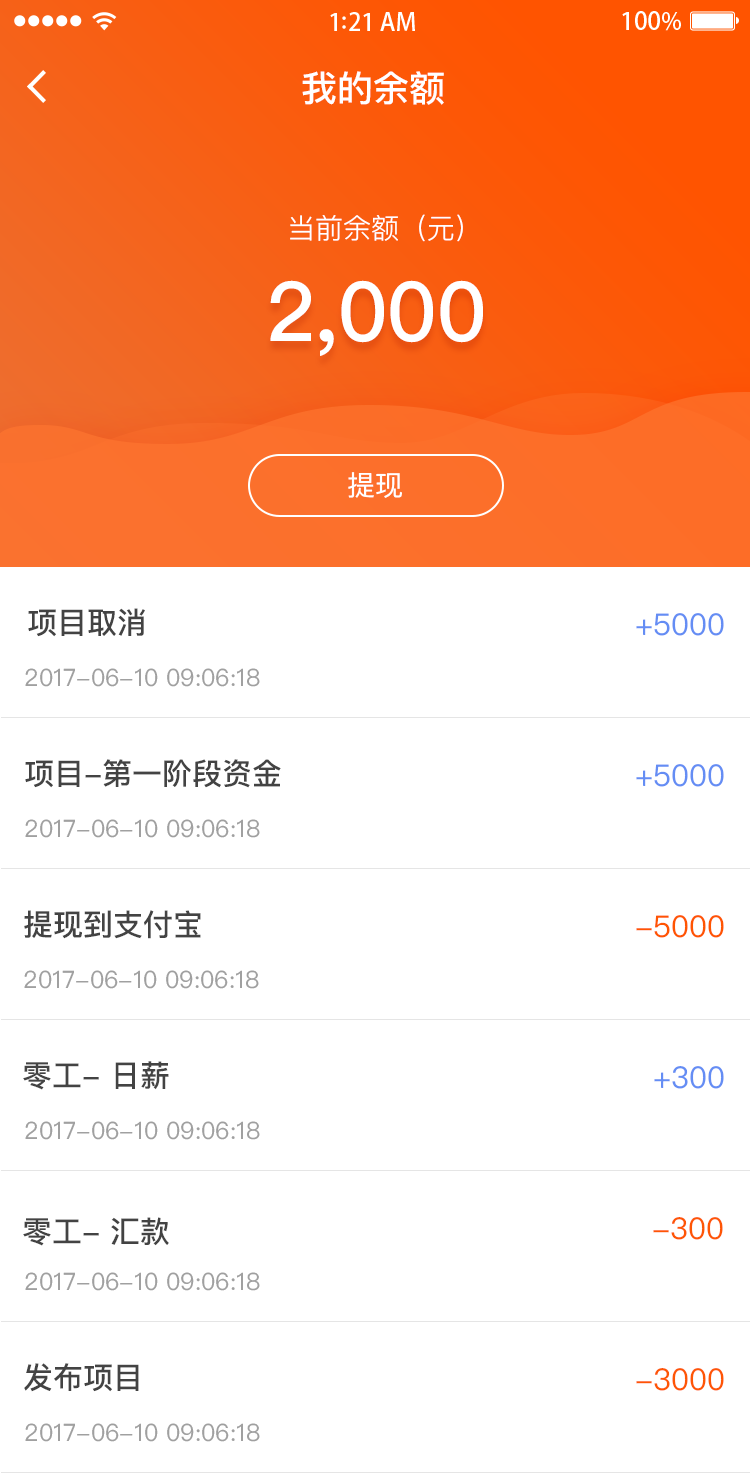
<style>
.page{position:relative;width:750px;height:1473px;background:#ffffff}
.page>*{position:absolute;margin:0}
.t1{font:36px "PingFangSC-Medium";color:#ffffff}
.t2{font:28px "PingFangSC-Light";color:#ffffff}
.t3{font:82.6px "PingFangSC-Medium";color:#ffffff}
.t4{font:28px "PingFangSC-Regular";color:#ffffff}
.t5{font:30px "PingFangSC-Medium";color:#434343}
.t6{font:30px "PingFangSC-Regular";color:#648df4}
.t7{font:24px "PingFangSC-Regular";color:#a0a0a0}
.t8{font:30px "PingFangSC-Regular";color:#ff5501}
.t9{font:30px "PingFangSC-Regular";color:#fe5604}
</style>
<div class="page">
<p class="t1" style="left:302px;top:71px;width:142px;height:34px">我的余额</p>
<p class="t2" style="left:290px;top:214px;width:173px;height:28px">当前余额（元）</p>
<p class="t3" style="left:270px;top:280px;width:213px;height:76px">2,000</p>
<p class="t4" style="left:348px;top:472px;width:54px;height:26px">提现</p>
<p class="t5" style="left:28px;top:608px;width:117px;height:29px">项目取消</p>
<p class="t6" style="left:636px;top:613px;width:88px;height:23px">+5000</p>
<p class="t7" style="left:25px;top:668px;width:235px;height:19px">2017-06-10 09:06:18</p>
<p class="t5" style="left:25px;top:759px;width:256px;height:29px">项目-第一阶段资金</p>
<p class="t6" style="left:636px;top:764px;width:88px;height:23px">+5000</p>
<p class="t7" style="left:25px;top:819px;width:235px;height:19px">2017-06-10 09:06:18</p>
<p class="t5" style="left:24px;top:910px;width:177px;height:29px">提现到支付宝</p>
<p class="t8" style="left:636px;top:915px;width:88px;height:23px">-5000</p>
<p class="t7" style="left:24px;top:970px;width:235px;height:19px">2017-06-10 09:06:18</p>
<p class="t5" style="left:23px;top:1061px;width:146px;height:29px">零工- 日薪</p>
<p class="t6" style="left:654px;top:1066px;width:70px;height:23px">+300</p>
<p class="t7" style="left:25px;top:1121px;width:235px;height:19px">2017-06-10 09:06:18</p>
<p class="t5" style="left:23px;top:1217px;width:146px;height:29px">零工- 汇款</p>
<p class="t9" style="left:653px;top:1217px;width:70px;height:23px">-300</p>
<p class="t7" style="left:25px;top:1272px;width:235px;height:19px">2017-06-10 09:06:18</p>
<p class="t5" style="left:24px;top:1363px;width:115px;height:29px">发布项目</p>
<p class="t9" style="left:636px;top:1368px;width:88px;height:23px">-3000</p>
<p class="t7" style="left:25px;top:1423px;width:235px;height:19px">2017-06-10 09:06:18</p>
</div>
